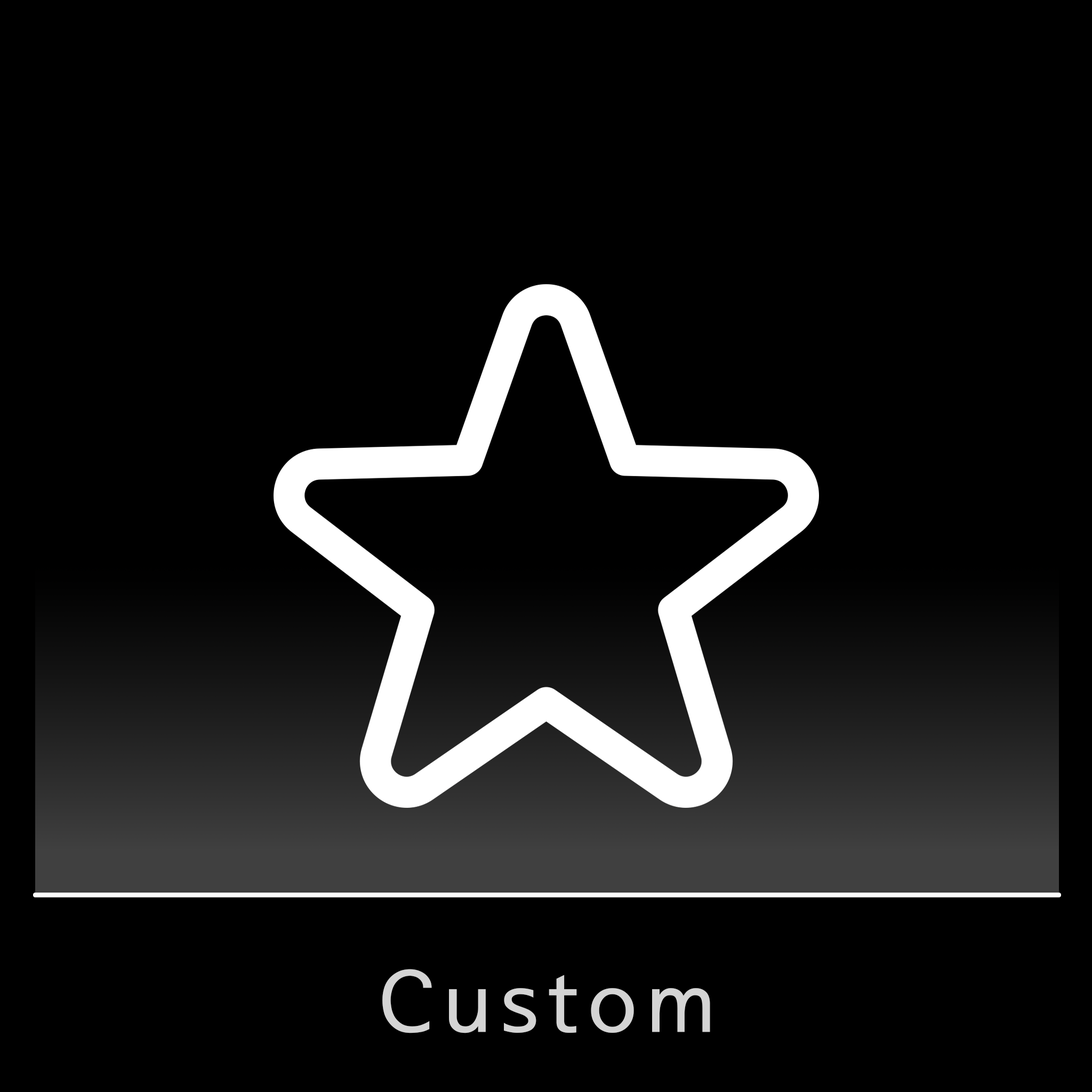
<style>
.page{position:relative;width:1092px;height:1092px;background:#000000}
.page>*{position:absolute;margin:0}
.t1{font:85.3px "SeoulNamsanB";letter-spacing:0.1em;color:#d4d4d4}
</style>
<div class="page">
<p class="t1" style="left:382px;top:969px;width:328px;height:64px">Custom</p>
</div>
